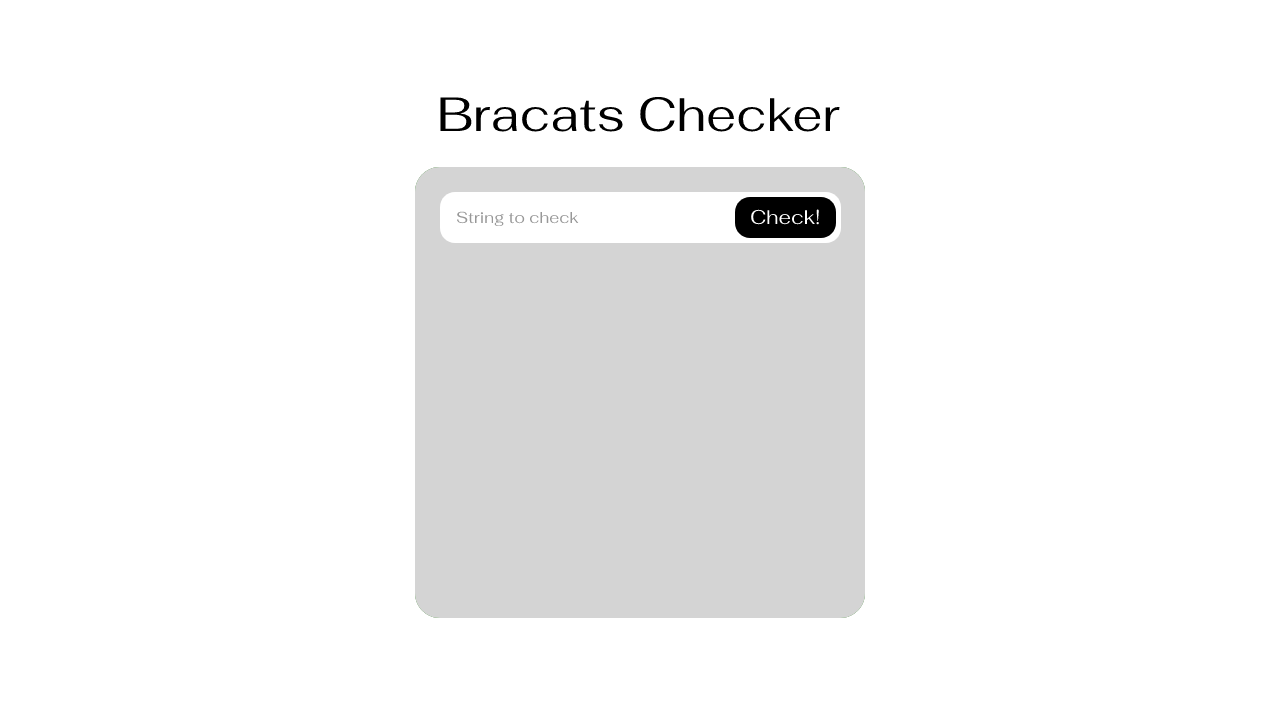
<style>
.page{position:relative;width:1280px;height:720px;background:#ffffff}
.page>*{position:absolute;margin:0}
.t1{font:48px "Fahkwang-Regular";color:#000000}
.t2{font:20px "Fahkwang-Regular";color:#ffffff}
.t3{font:16px "Fahkwang-Regular";color:#989898}
</style>
<div class="page">
<p class="t1" style="left:440px;top:96px;width:400px;height:36px">Bracats Checker</p>
<p class="t2" style="left:751px;top:209px;width:68px;height:16px">Check!</p>
<p class="t2" style="left:751px;top:209px;width:68px;height:16px">Check!</p>
<p class="t2" style="left:751px;top:209px;width:68px;height:16px">Check!</p>
<p class="t3" style="left:456px;top:211px;width:123px;height:16px">String to check</p>
</div>
